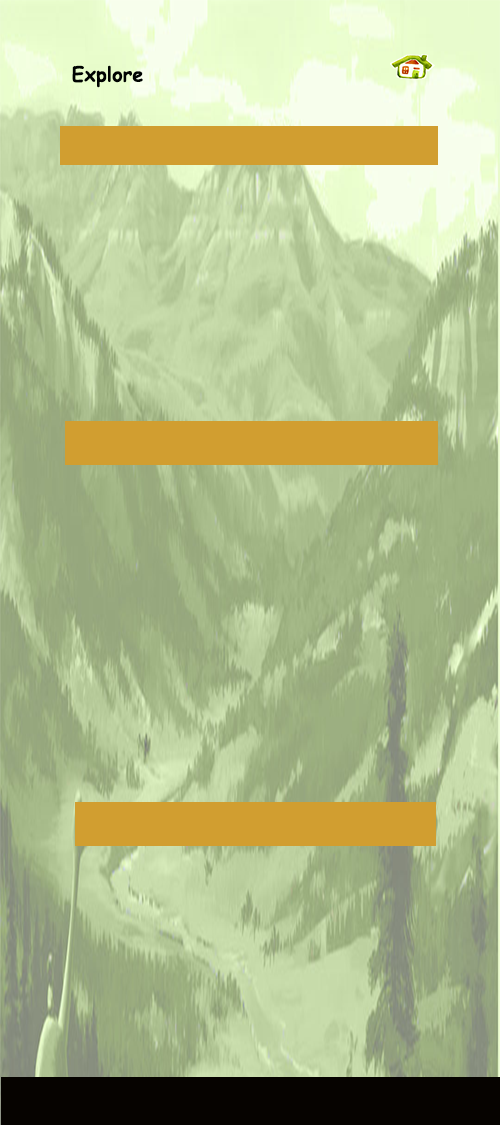
<style>
.page{position:relative;width:500px;height:1125px}
.page>*{position:absolute;margin:0}
.t1{font:20px "ComicSansMS-Bold";color:#000302}
</style>
<div class="page">
<p class="t1" style="left:72px;top:65px;width:71px;height:23px">Explore</p>
</div>
